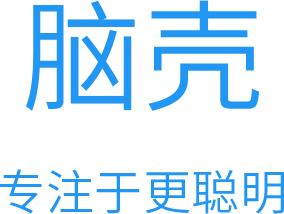
<style>
.page{position:relative;width:284px;height:214px;background:#ffffff}
.page>*{position:absolute;margin:0}
.t1{font:120px "SourceHanSansCN-Normal";letter-spacing:0.01em;color:#2196f3}
.t2{font:48px "SourceHanSansCN-Normal";letter-spacing:0.01em;color:#2196f3}
</style>
<div class="page">
<p class="t1" style="left:25px;top:0px;width:235px;height:111px">脑壳</p>
<p class="t2" style="left:0px;top:169px;width:284px;height:45px">专注于更聪明</p>
</div>
